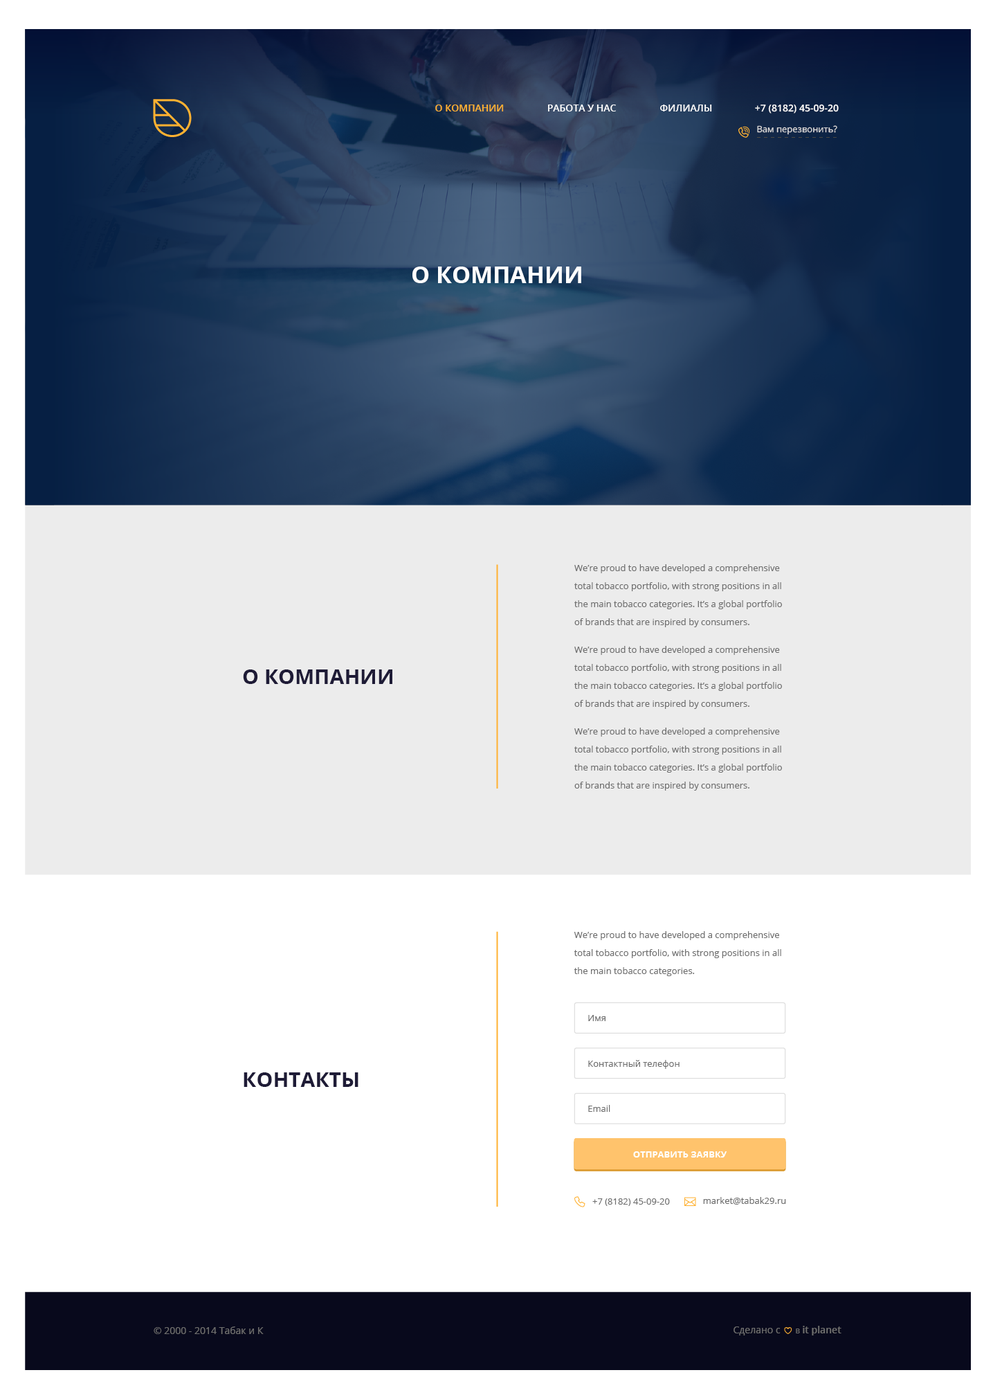
<style>
.page{position:relative;width:993px;height:1395px;background:#ffffff}
.page>*{position:absolute;margin:0}
.t1{font:9.7px "OpenSans-Semibold";color:#ffb131}
.t2{font:9.7px "OpenSans-Semibold";color:#ffffff}
.t3{font:9.6px "OpenSans-Semibold";color:#ffffff}
.t4{font:8.9px "OpenSans";color:#dfdfdf}
.t5{font:23.5px "OpenSans-Bold";color:#ffffff;text-transform:uppercase}
.t6{font:9px/12.5px "OpenSans";color:#6e6e6e}
.t7{font:20.8px "OpenSans-Bold";color:#1e1b36;text-transform:uppercase}
.t8{font:9px "OpenSans";color:#6e6e6e}
.t9{font:9.7px "OpenSans";color:#6e6e6e}
.t10{font:9.7px "OpenSans";color:#6e6e6e;font-variant:small-caps}
.t11{font:9.7px "OpenSans-Semibold";color:#707070}
</style>
<div class="page">
<p class="t1" style="left:435px;top:105px;width:69px;height:6px">О КОМПАНИИ</p>
<p class="t2" style="left:548px;top:105px;width:68px;height:6px">РАБОТА У НАС</p>
<p class="t2" style="left:660px;top:105px;width:52px;height:6px">ФИЛИАЛЫ</p>
<p class="t3" style="left:755px;top:104px;width:84px;height:10px">+7 (8182) 45-09-20</p>
<p class="t4" style="left:757px;top:125px;width:81px;height:10px">Вам перезвонить?</p>
<p class="t5" style="left:413px;top:267px;width:169px;height:16px">О компании</p>
<p class="t6" style="left:575px;top:564px;width:207px;height:63px">We’re proud to have developed a comprehensive<br>total tobacco portfolio, with strong positions in all <br>the main tobacco categories. It’s a global portfolio <br>of brands that are inspired by consumers.</p>
<p class="t6" style="left:575px;top:646px;width:207px;height:63px">We’re proud to have developed a comprehensive<br>total tobacco portfolio, with strong positions in all <br>the main tobacco categories. It’s a global portfolio <br>of brands that are inspired by consumers.</p>
<p class="t7" style="left:243px;top:669px;width:150px;height:15px">О компании</p>
<p class="t6" style="left:575px;top:728px;width:207px;height:63px">We’re proud to have developed a comprehensive<br>total tobacco portfolio, with strong positions in all <br>the main tobacco categories. It’s a global portfolio <br>of brands that are inspired by consumers.</p>
<p class="t6" style="left:574px;top:931px;width:208px;height:45px">We’re proud to have developed a comprehensive<br>total tobacco portfolio, with strong positions in all <br>the main tobacco categories.</p>
<p class="t8" style="left:588px;top:1015px;width:18px;height:6px">Имя</p>
<p class="t8" style="left:588px;top:1060px;width:92px;height:9px">Контактный телефон</p>
<p class="t7" style="left:244px;top:1072px;width:115px;height:15px">КОНТАКТЫ</p>
<p class="t8" style="left:588px;top:1105px;width:23px;height:7px">Email</p>
<p class="t8" style="left:593px;top:1198px;width:77px;height:8px">+7 (8182) 45-09-20</p>
<p class="t8" style="left:703px;top:1197px;width:83px;height:8px">market@tabak29.ru</p>
<p class="t9" style="left:734px;top:1326px;width:108px;height:9px">Сделано с <span class="t10">     в </span><span class="t11">it planet</span></p>
<p class="t9" style="left:154px;top:1326px;width:110px;height:8px">© 2000 - 2014 Табак и К</p>
</div>
